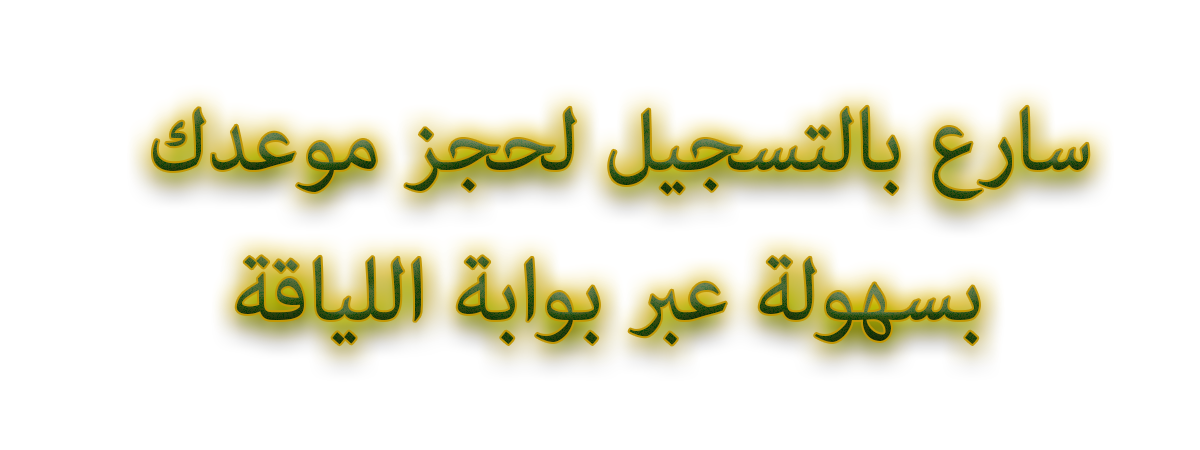
<style>
.page{position:relative;width:1200px;height:450px;background:#ffffff}
.page>*{position:absolute;margin:0}
.t1{font:125px "AdobeArabic-Regular"}
</style>
<div class="page">
<p class="t1" style="left:153px;top:106px;width:936px;height:239px;text-align:center">سارع بالتسجيل لحجز موعدك<br>بسهولة عبر بوابة اللياقة</p>
</div>
